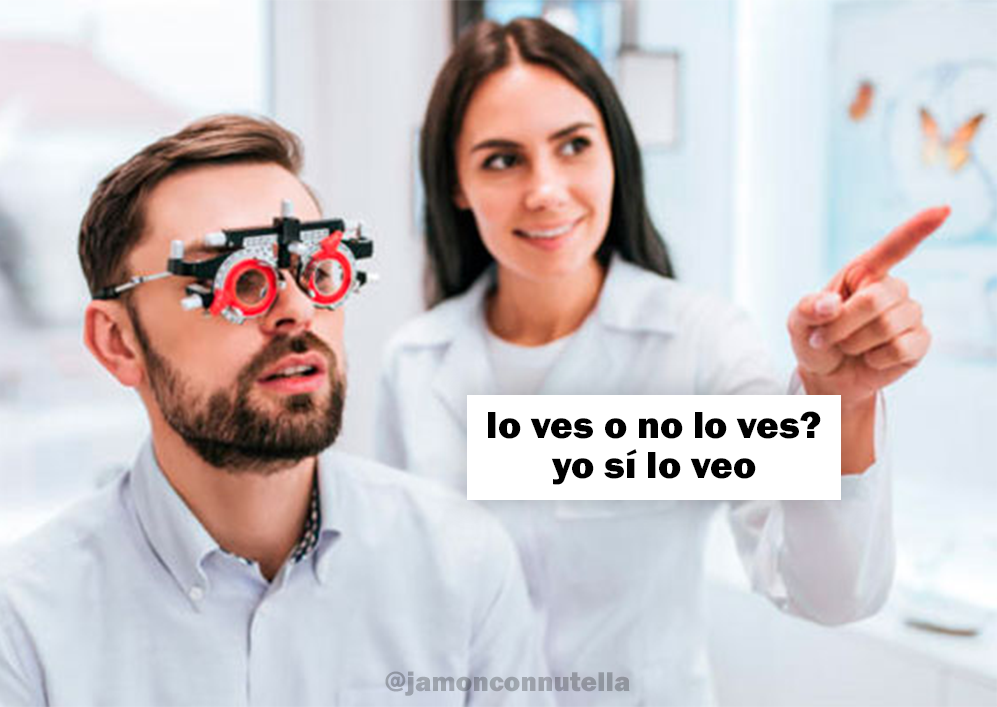
<style>
.page{position:relative;width:997px;height:707px}
.page>*{position:absolute;margin:0}
.t1{font:39.1px "FranklinGothic-Heavy";color:#000000}
.t2{font:28.2px "FranklinGothic-Heavy";color:#969ca6}
</style>
<div class="page">
<p class="t1" style="left:488px;top:411px;width:333px;height:74px;text-align:center">lo ves o no lo ves?<br>yo sí lo veo</p>
<p class="t2" style="left:385px;top:671px;width:245px;height:25px">@jamonconnutella</p>
</div>
